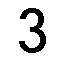
<style>
.page{position:relative;width:64px;height:64px;background:#ffffff}
.page>*{position:absolute;margin:0}
.t1{font:60px "MicrosoftSansSerif";color:#000000}
</style>
<div class="page">
<p class="t1" style="left:19px;top:8px;width:27px;height:45px">3</p>
</div>
